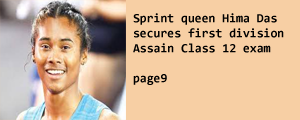
<style>
.page{position:relative;width:300px;height:120px;background:#f7cfa4}
.page>*{position:absolute;margin:0}
.t1{font:12.5px "Consolas-Bold";color:#000000}
</style>
<div class="page">
<p class="t1" style="left:133px;top:13px;width:151px;height:72px">Sprint queen Hima Das<br>secures first division<br>Assain Class 12 exam<br><br>page9</p>
</div>
